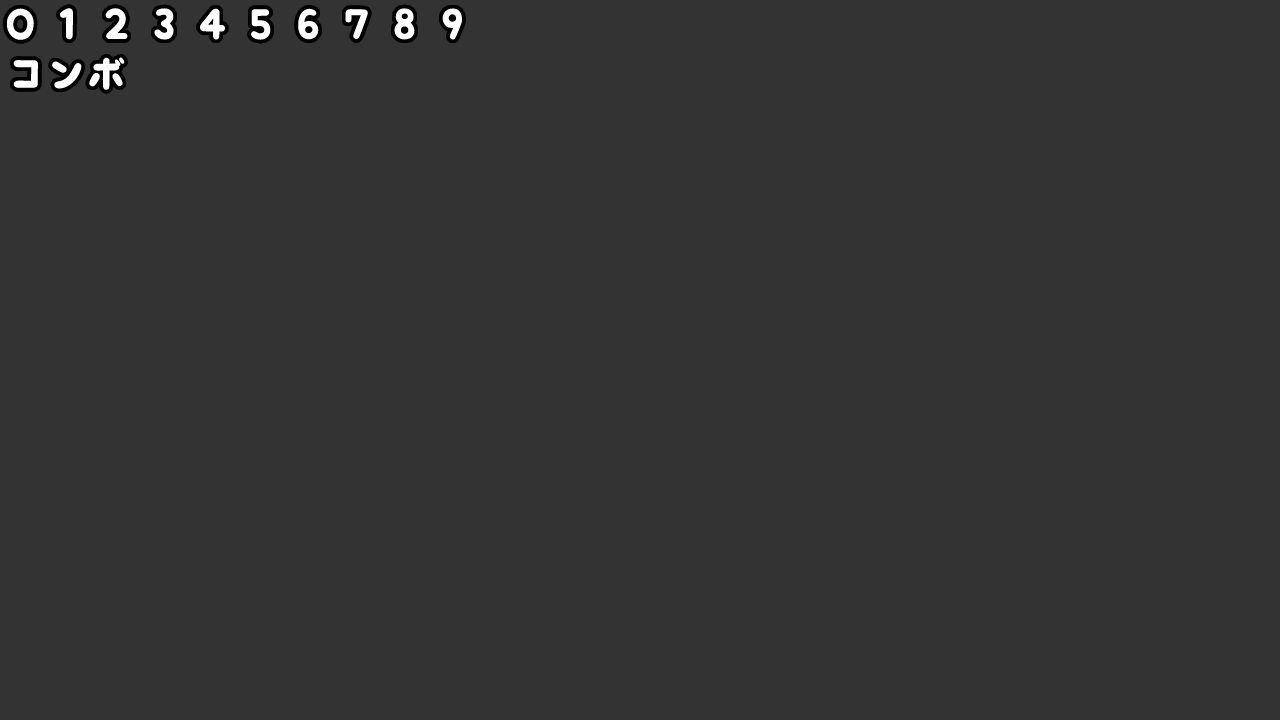
<style>
.page{position:relative;width:1280px;height:720px;background:#333333}
.page>*{position:absolute;margin:0}
.t1{font:40px "mini-wakuwaku";color:#ffffff}
</style>
<div class="page">
<p class="t1" style="left:6px;top:7px;width:457px;height:35px">0 1 2 3 4 5 6 7 8 9</p>
<p class="t1" style="left:13px;top:57px;width:112px;height:33px">コンボ</p>
</div>
